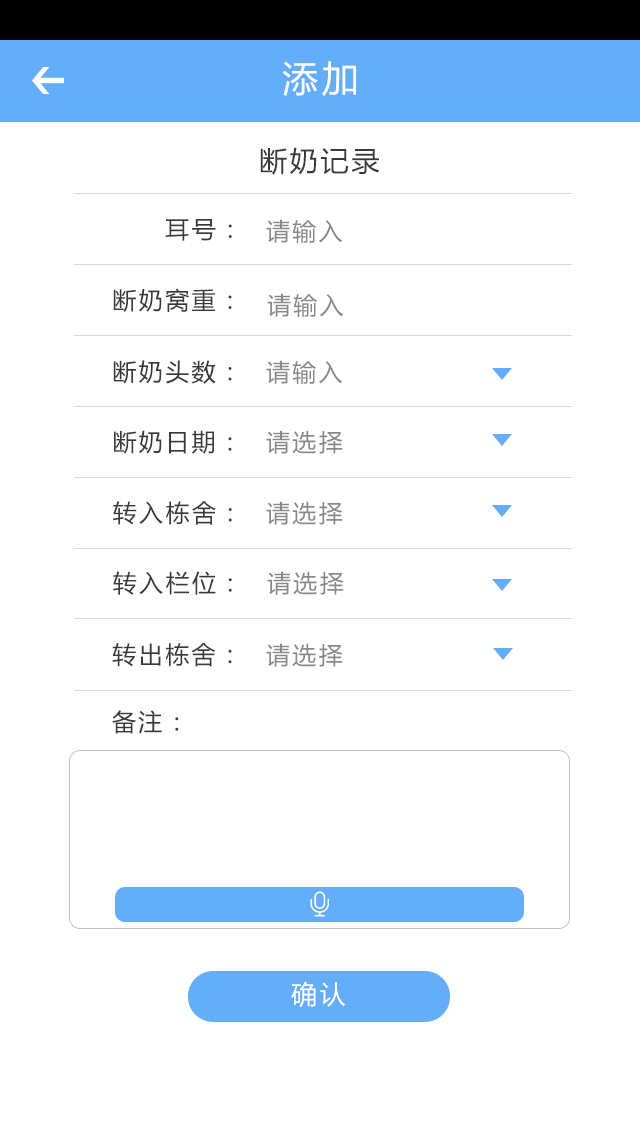
<style>
.page{position:relative;width:640px;height:1136px;background:#ffffff}
.page>*{position:absolute;margin:0}
.t1{font:36px "MicrosoftYaHei";letter-spacing:0.1em;color:#ffffff}
.t2{font:28px "MicrosoftYaHei";letter-spacing:0.1em;color:#3a3939}
.t3{font:24px "MicrosoftYaHei";letter-spacing:0.1em;color:#3a3939}
.t4{font:24px "MicrosoftYaHei";letter-spacing:0.1em;color:#898888}
.t5{font:26px "MicrosoftYaHei";letter-spacing:0.1em;color:#ffffff}
</style>
<div class="page">
<p class="t1" style="left:282px;top:61px;width:74px;height:35px">添加</p>
<p class="t2" style="left:260px;top:147px;width:120px;height:28px">断奶记录</p>
<p class="t3" style="left:165px;top:219px;width:67px;height:22px">耳号：</p>
<p class="t4" style="left:266px;top:219px;width:77px;height:24px">请输入</p>
<p class="t3" style="left:113px;top:288px;width:119px;height:24px">断奶窝重：</p>
<p class="t4" style="left:267px;top:293px;width:77px;height:24px">请输入</p>
<p class="t3" style="left:113px;top:360px;width:119px;height:24px">断奶头数：</p>
<p class="t4" style="left:266px;top:360px;width:77px;height:24px">请输入</p>
<p class="t3" style="left:114px;top:430px;width:118px;height:24px">断奶日期：</p>
<p class="t4" style="left:266px;top:430px;width:77px;height:24px">请选择</p>
<p class="t3" style="left:113px;top:501px;width:119px;height:24px">转入栋舍：</p>
<p class="t4" style="left:266px;top:501px;width:77px;height:24px">请选择</p>
<p class="t3" style="left:113px;top:571px;width:119px;height:24px">转入栏位：</p>
<p class="t4" style="left:267px;top:571px;width:77px;height:24px">请选择</p>
<p class="t3" style="left:112px;top:643px;width:120px;height:24px">转出栋舍：</p>
<p class="t4" style="left:266px;top:643px;width:77px;height:24px">请选择</p>
<p class="t3" style="left:112px;top:710px;width:67px;height:24px">备注：</p>
<p class="t5" style="left:291px;top:981px;width:55px;height:27px">确认</p>
</div>
